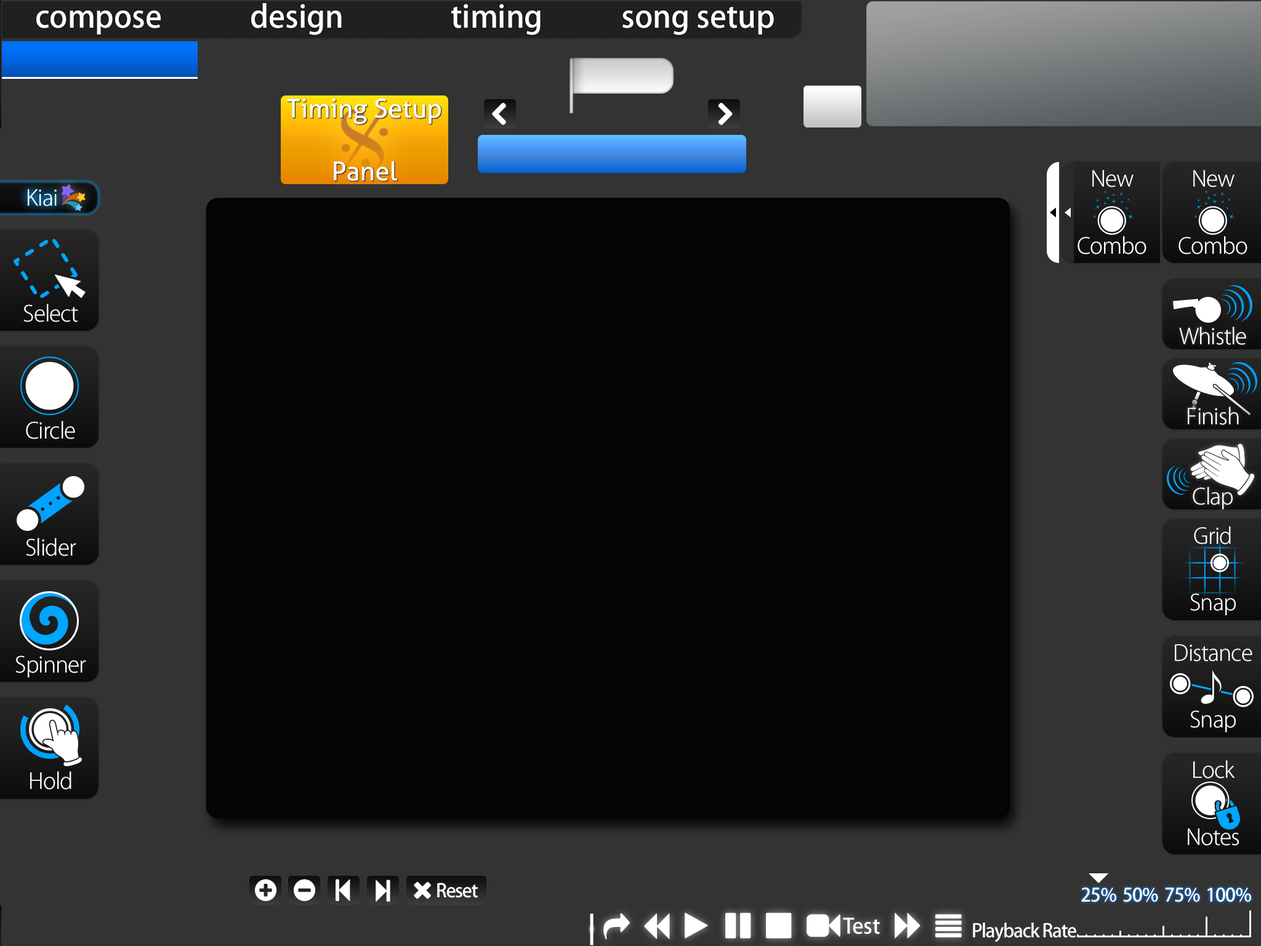
<style>
.page{position:relative;width:1261px;height:946px;background:#040404}
.page>*{position:absolute;margin:0}
.t1{font:30.6px "KozGoPr6N-Medium";color:#ffffff}
.t2{font:26px "Aller";color:#ffffff}
.t3{font:21.8px "KozGoPr6N-Light";letter-spacing:-0.025em;color:#ffffff}
.t4{font:21.7px "KozGoPr6N-Light";letter-spacing:-0.025em;color:#ffffff}
.t5{font:18.5px "KozGoPr6N-Medium";letter-spacing:-0.05em;color:#ffffff}
.t6{font:18.5px "KozGoPr6N-Medium";letter-spacing:-0.025em;color:#ffffff}
</style>
<div class="page">
<p class="t1" style="left:251px;top:3px;width:91px;height:32px">design</p>
<p class="t1" style="left:451px;top:4px;width:90px;height:31px">timing</p>
<p class="t1" style="left:36px;top:10px;width:125px;height:24px">compose</p>
<p class="t1" style="left:622px;top:6px;width:152px;height:29px">song setup</p>
<p class="t2" style="left:287px;top:99px;width:154px;height:25px">Timing Setup</p>
<p class="t2" style="left:334px;top:161px;width:63px;height:20px">Panel</p>
<p class="t3" style="left:1092px;top:170px;width:41px;height:17px">New</p>
<p class="t3" style="left:1193px;top:170px;width:41px;height:17px">New</p>
<p class="t4" style="left:28px;top:189px;width:29px;height:17px">Kiai</p>
<p class="t3" style="left:1077px;top:236px;width:69px;height:18px">Combo</p>
<p class="t3" style="left:1178px;top:236px;width:69px;height:18px">Combo</p>
<p class="t3" style="left:23px;top:304px;width:55px;height:18px">Select</p>
<p class="t3" style="left:1179px;top:326px;width:67px;height:19px">Whistle</p>
<p class="t3" style="left:1188px;top:406px;width:51px;height:19px">Finish</p>
<p class="t3" style="left:26px;top:421px;width:49px;height:18px">Circle</p>
<p class="t3" style="left:1193px;top:486px;width:40px;height:23px">Clap</p>
<p class="t3" style="left:1194px;top:526px;width:37px;height:18px">Grid</p>
<p class="t3" style="left:26px;top:537px;width:50px;height:19px">Slider</p>
<p class="t3" style="left:1190px;top:593px;width:46px;height:22px">Snap</p>
<p class="t3" style="left:1175px;top:644px;width:77px;height:17px">Distance</p>
<p class="t3" style="left:15px;top:655px;width:71px;height:22px">Spinner</p>
<p class="t3" style="left:1190px;top:710px;width:46px;height:22px">Snap</p>
<p class="t3" style="left:1193px;top:760px;width:42px;height:18px">Lock</p>
<p class="t3" style="left:30px;top:771px;width:41px;height:18px">Hold</p>
<p class="t3" style="left:1188px;top:828px;width:51px;height:17px">Notes</p>
<p class="t5" style="left:437px;top:882px;width:41px;height:16px">Reset</p>
<p class="t6" style="left:1081px;top:887px;width:35px;height:15px">25%</p>
<p class="t6" style="left:1123px;top:887px;width:35px;height:15px">50%</p>
<p class="t6" style="left:1165px;top:887px;width:35px;height:15px">75%</p>
<p class="t6" style="left:1207px;top:887px;width:44px;height:15px">100%</p>
<p class="t5" style="left:973px;top:922px;width:103px;height:20px">Playback Rate</p>
</div>
